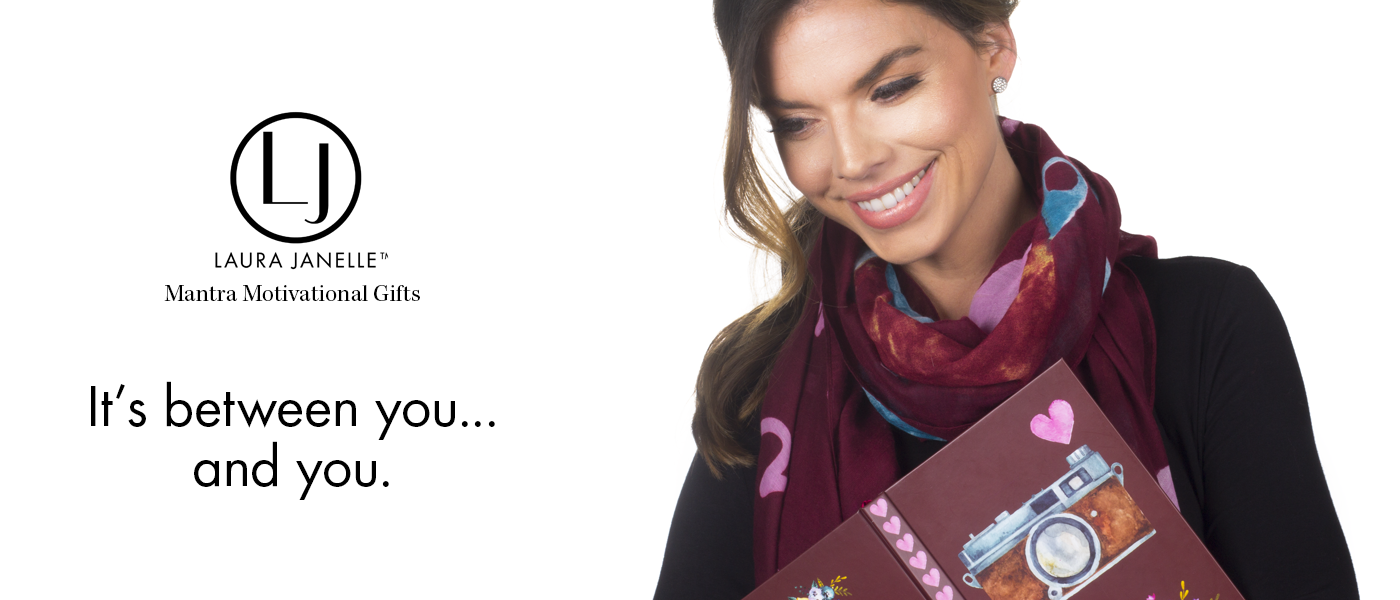
<style>
.page{position:relative;width:1400px;height:600px;background:#ffffff}
.page>*{position:absolute;margin:0}
.t1{font:24px "KeplerStd-Regular";color:#000000}
.t2{font:60px/60px "Futura-Boo";color:#000000}
</style>
<div class="page">
<p class="t1" style="left:164px;top:285px;width:256px;height:16px">Mantra Motivational Gifts</p>
<p class="t2" style="left:91px;top:381px;width:404px;height:119px;text-align:center">It’s between you...<br>and you.</p>
</div>
